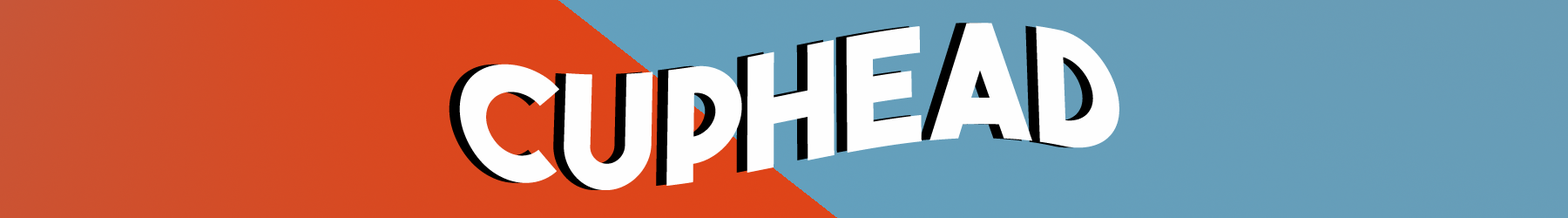
<style>
.page{position:relative;width:1568px;height:218px}
.page>*{position:absolute;margin:0}
.t1{font:156.8px "TheBoldFont-Bold";color:#fefefe}
</style>
<div class="page">
<p class="t1" style="left:459px;top:23px;width:660px;height:167px">CUPHEAD</p>
</div>
